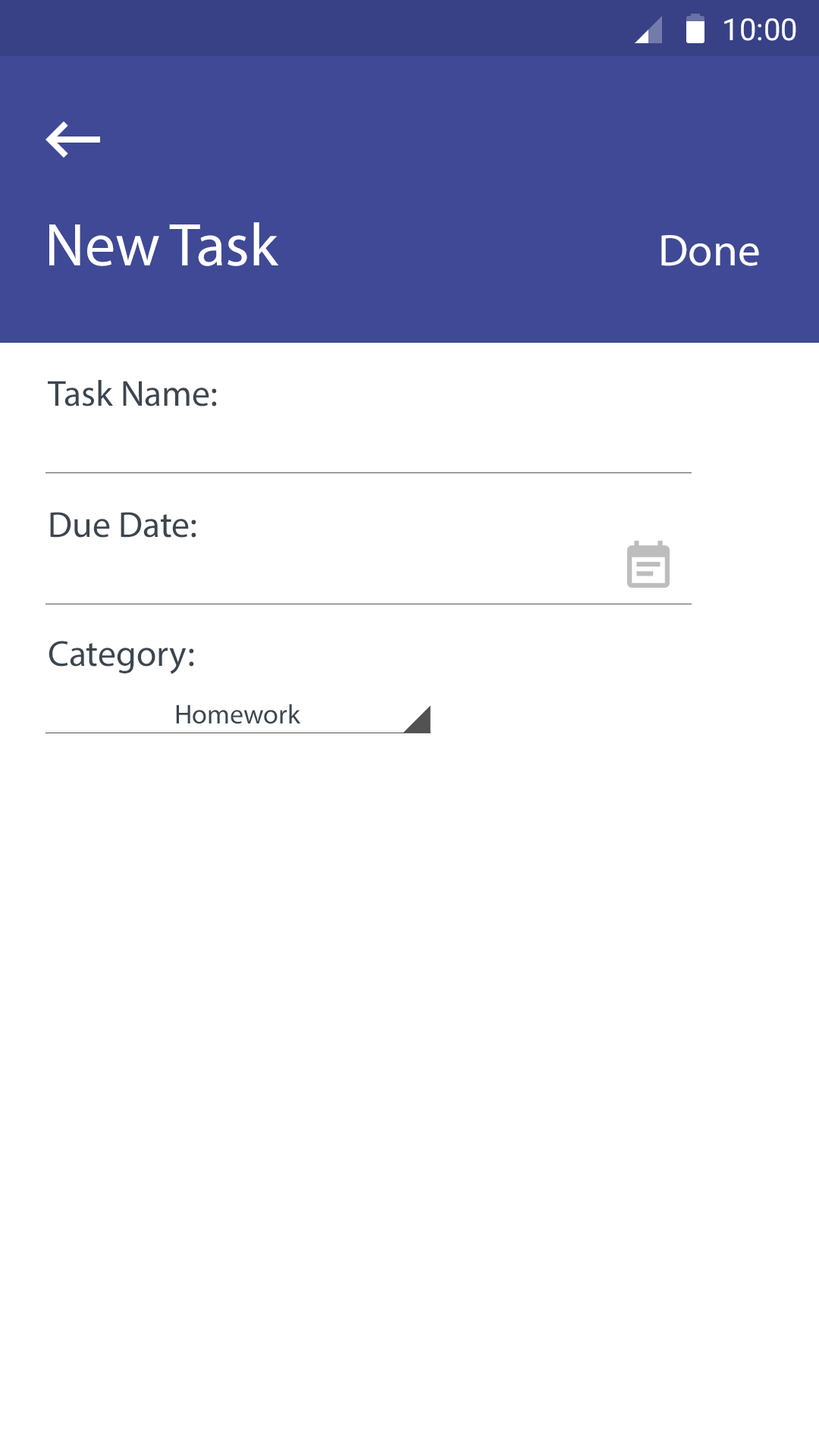
<style>
.page{position:relative;width:819px;height:1456px;background:#ffffff}
.page>*{position:absolute;margin:0}
.t1{font:30.3px "Roboto-Regular";color:#ffffff}
.t2{font:60.7px "MyriadPro-Regular";color:#ffffff}
.t3{font:44.7px "MyriadPro-Regular";color:#ffffff}
.t4{font:36.4px "MyriadPro-Regular";color:#3c464f}
.t5{font:27.3px "MyriadPro-Regular";color:#3c464f}
</style>
<div class="page">
<p class="t1" style="left:724px;top:18px;width:72px;height:23px">10:00</p>
<p class="t2" style="left:49px;top:222px;width:230px;height:44px">New Task</p>
<p class="t3" style="left:661px;top:235px;width:98px;height:31px">Done</p>
<p class="t4" style="left:48px;top:380px;width:169px;height:26px">Task Name:</p>
<p class="t4" style="left:50px;top:512px;width:146px;height:26px">Due Date:</p>
<p class="t4" style="left:49px;top:641px;width:145px;height:33px">Category:</p>
<p class="t5" style="left:176px;top:704px;width:125px;height:20px">Homework</p>
</div>
